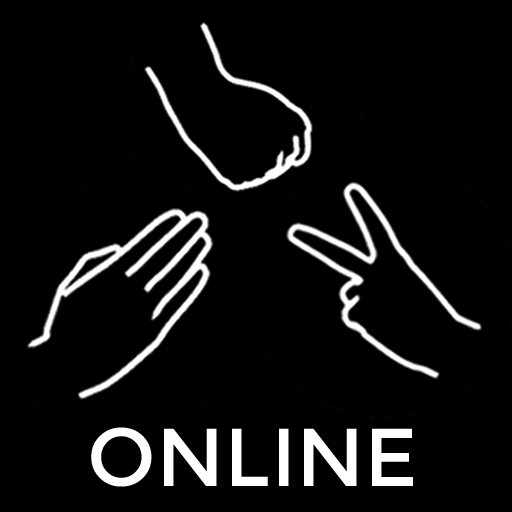
<style>
.page{position:relative;width:512px;height:512px;background:#000000}
.page>*{position:absolute;margin:0}
.t1{font:81.9px "Montserrat-Regular";color:#ffffff}
</style>
<div class="page">
<p class="t1" style="left:91px;top:427px;width:322px;height:60px">ONLINE</p>
</div>
